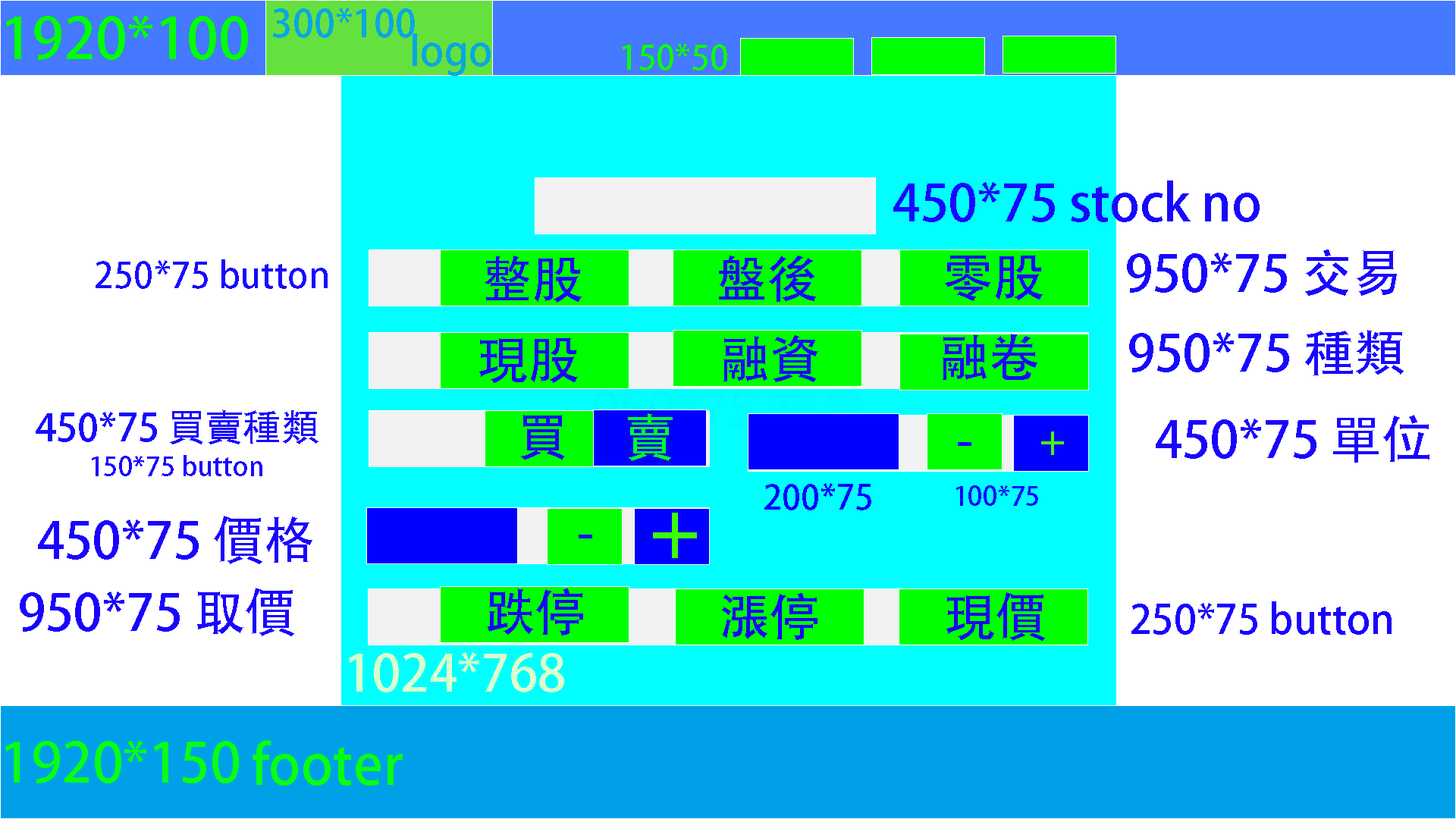
<style>
.page{position:relative;width:1456px;height:819px;background:#ffffff}
.page>*{position:absolute;margin:0}
.t1{font:56.9px "AdobeHeitiStd-Regular";color:#02ff08}
.t2{font:37.6px "AdobeHeitiStd-Regular";color:#0aa7e1}
.t3{font:41px "AdobeHeitiStd-Regular";color:#0aa7e1}
.t4{font:33.6px "AdobeHeitiStd-Regular";color:#0cff0c}
.t5{font:50.6px "AdobeHeitiStd-Regular";color:#1807ff}
.t6{font:35.6px "AdobeHeitiStd-Regular";color:#1807ff}
.t7{font:37.9px "AdobeHeitiStd-Regular";color:#1807ff}
.t8{font:50.6px "AdobeHeitiStd-Regular";color:#01ff2b}
.t9{font:50.6px "AdobeHeitiStd-Regular";color:#1a02ff}
.t10{font:38.9px "AdobeHeitiStd-Regular";color:#48ff00}
.t11{font:26.5px "AdobeHeitiStd-Regular";color:#1a02ff}
.t12{font:33.9px "AdobeHeitiStd-Regular";color:#0101ff}
.t13{font:26.7px "AdobeHeitiStd-Regular";color:#0101ff}
.t14{font:74.2px "AdobeHeitiStd-Regular";color:#3cff00}
.t15{font:40px "AdobeHeitiStd-Regular";color:#1a02ff}
.t16{font:50.6px "AdobeHeitiStd-Regular";color:#daffcb}
.t17{font:54.6px "AdobeHeitiStd-Regular";color:#08ff14}
</style>
<div class="page">
<p class="t1" style="left:6px;top:15px;width:242px;height:45px">1920*100</p>
<p class="t2" style="left:273px;top:8px;width:142px;height:30px">300*100</p>
<p class="t3" style="left:413px;top:33px;width:78px;height:43px">logo</p>
<p class="t4" style="left:622px;top:43px;width:105px;height:28px">150*50</p>
<p class="t5" style="left:893px;top:180px;width:367px;height:42px">450*75 stock no</p>
<p class="t5" style="left:485px;top:256px;width:97px;height:47px">整股</p>
<p class="t5" style="left:719px;top:256px;width:97px;height:46px">盤後</p>
<p class="t5" style="left:945px;top:256px;width:98px;height:45px">零股</p>
<p class="t5" style="left:1127px;top:249px;width:270px;height:47px">950*75 交易</p>
<p class="t6" style="left:96px;top:259px;width:232px;height:30px">250*75 button</p>
<p class="t5" style="left:1129px;top:330px;width:275px;height:46px">950*75 種類</p>
<p class="t5" style="left:479px;top:338px;width:99px;height:45px">現股</p>
<p class="t5" style="left:723px;top:335px;width:95px;height:47px">融資</p>
<p class="t5" style="left:943px;top:334px;width:94px;height:46px">融卷</p>
<p class="t7" style="left:36px;top:409px;width:282px;height:35px">450*75 買賣種類</p>
<p class="t8" style="left:628px;top:413px;width:45px;height:48px">賣</p>
<p class="t5" style="left:521px;top:415px;width:43px;height:45px">買</p>
<p class="t9" style="left:1156px;top:415px;width:273px;height:48px">450*75 單位</p>
<p class="t10" style="left:1041px;top:431px;width:23px;height:24px">+</p>
<p class="t11" style="left:92px;top:455px;width:170px;height:21px">150*75 button</p>
<p class="t12" style="left:764px;top:483px;width:107px;height:27px">200*75</p>
<p class="t13" style="left:956px;top:485px;width:82px;height:21px">100*75</p>
<p class="t9" style="left:38px;top:516px;width:274px;height:48px">450*75 價格</p>
<p class="t14" style="left:653px;top:513px;width:44px;height:45px">+</p>
<p class="t9" style="left:20px;top:588px;width:274px;height:48px">950*75 取價</p>
<p class="t9" style="left:488px;top:588px;width:95px;height:47px">跌停</p>
<p class="t9" style="left:722px;top:593px;width:95px;height:47px">漲停</p>
<p class="t9" style="left:946px;top:592px;width:99px;height:49px">現價</p>
<p class="t15" style="left:1131px;top:601px;width:261px;height:34px">250*75 button</p>
<p class="t16" style="left:349px;top:652px;width:215px;height:40px">1024*768</p>
<p class="t17" style="left:5px;top:740px;width:234px;height:43px">1920*150</p>
<p class="t17" style="left:253px;top:740px;width:150px;height:46px">footer</p>
</div>
